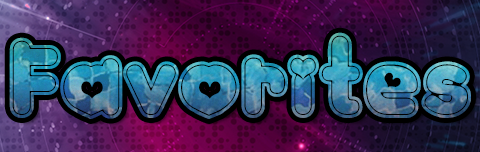
<style>
.page{position:relative;width:480px;height:152px}
.page>*{position:absolute;margin:0}
.t1{font:100px "Kinkie";font-weight:bold}
</style>
<div class="page">
<p class="t1" style="left:9px;top:32px;width:462px;height:87px">Favorites</p>
</div>
